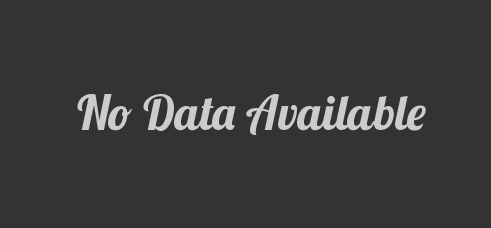
<style>
.page{position:relative;width:491px;height:228px;background:#333333}
.page>*{position:absolute;margin:0}
.t1{font:48px "Lobster1.4";color:#cccccc}
</style>
<div class="page">
<p class="t1" style="left:77px;top:94px;width:349px;height:41px">No Data Available</p>
</div>
